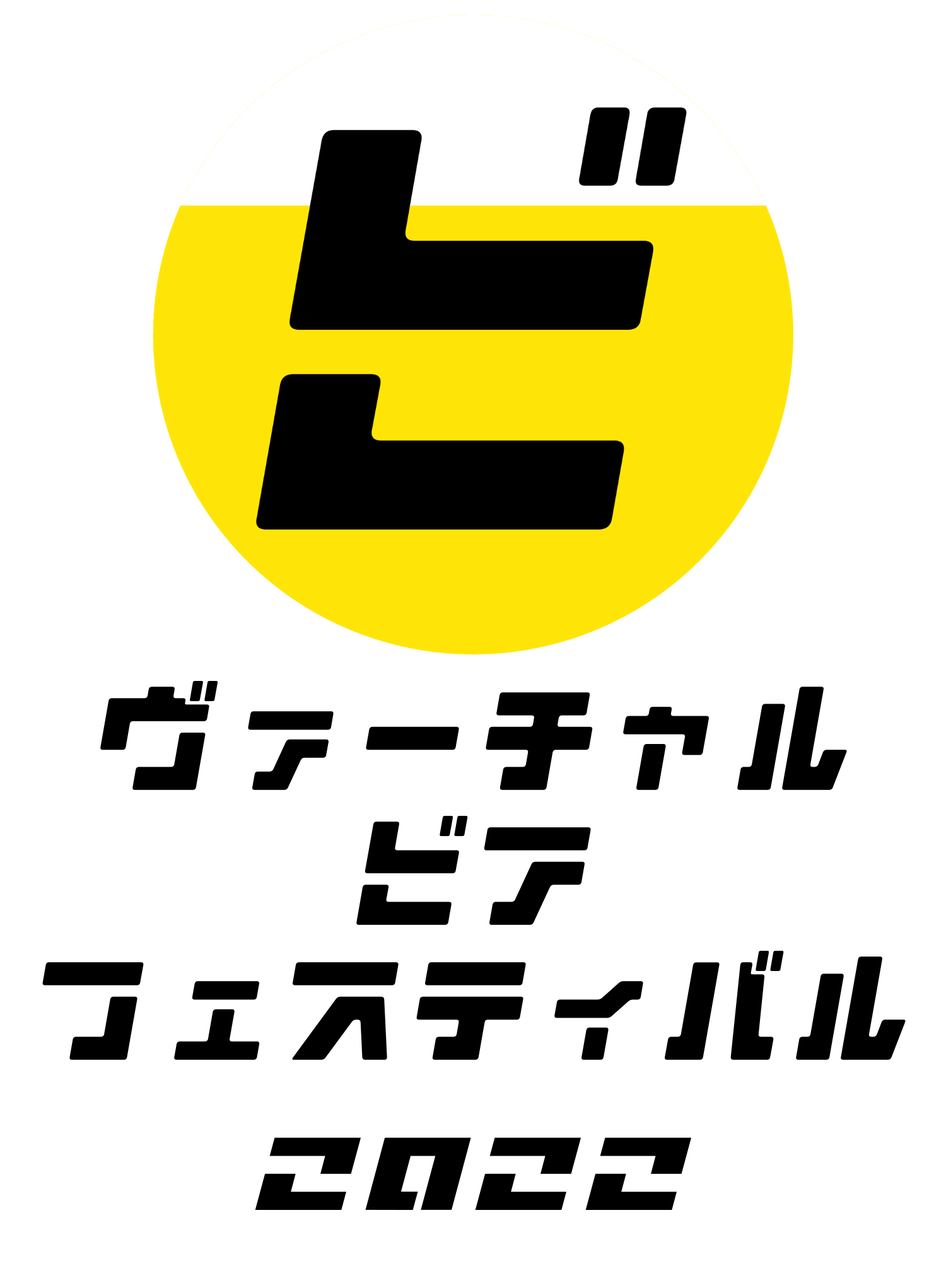
<style>
.page{position:relative;width:946px;height:1261px;background:#ffffff}
.page>*{position:absolute;margin:0}
.t1{font:126.1px "Motogi";color:#000000}
.t2{font:94.6px "ContinueAL";color:#000000}
</style>
<div class="page">
<p class="t1" style="left:100px;top:681px;width:747px;height:109px">ヴァーチャル</p>
<p class="t1" style="left:356px;top:816px;width:235px;height:109px">ビア</p>
<p class="t1" style="left:42px;top:951px;width:863px;height:109px">フェスティバル</p>
<p class="t2" style="left:255px;top:1137px;width:436px;height:73px">2022</p>
</div>
